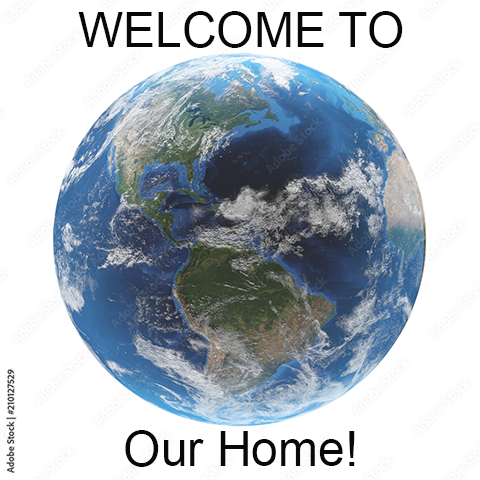
<style>
.page{position:relative;width:480px;height:480px;background:#ffffff}
.page>*{position:absolute;margin:0}
.t1{font:48px "ArialMT";color:#080808}
</style>
<div class="page">
<p class="t1" style="left:78px;top:11px;width:325px;height:37px">WELCOME TO</p>
<p class="t1" style="left:125px;top:430px;width:230px;height:37px">Our Home!</p>
</div>
